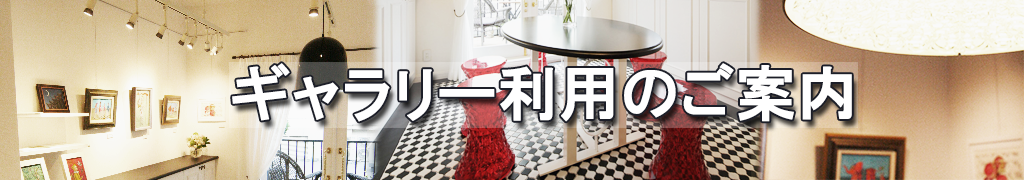
<style>
.page{position:relative;width:1024px;height:180px}
.page>*{position:absolute;margin:0}
.t1{font:60px "HGPGothicE";color:#ffffff;font-weight:bold}
</style>
<div class="page">
<p class="t1" style="left:232px;top:63px;width:620px;height:59px">ギャラリー利用のご案内</p>
</div>
